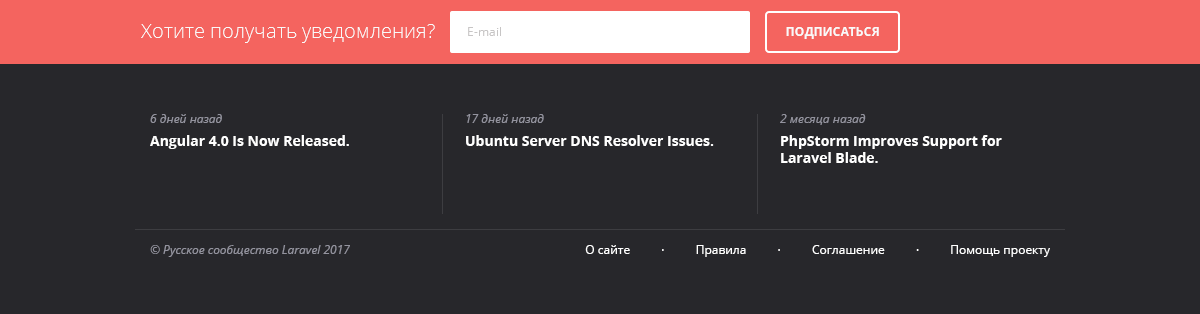
<style>
.page{position:relative;width:1200px;height:314px;background:#27272b}
.page>*{position:absolute;margin:0}
.t1{font:20px "OpenSans-Light";color:#f9f9f9}
.t2{font:12px "OpenSans";color:#c7c5c5}
.t3{font:12px "OpenSans-Bold";color:#f9f9f9}
.t4{font:12px "OpenSans-Italic";color:#93939e}
.t5{font:14px "OpenSans-Bold";color:#ffffff}
.t6{font:12px "OpenSans";color:#ffffff}
</style>
<div class="page">
<p class="t1" style="left:141px;top:24px;width:294px;height:19px">Хотите получать уведомления?</p>
<p class="t2" style="left:468px;top:27px;width:33px;height:9px">E-mail</p>
<p class="t3" style="left:786px;top:27px;width:93px;height:12px">ПОДПИСАТЬСЯ</p>
<p class="t4" style="left:150px;top:114px;width:72px;height:9px">6 дней назад</p>
<p class="t4" style="left:466px;top:114px;width:78px;height:9px">17 дней назад</p>
<p class="t4" style="left:780px;top:114px;width:86px;height:11px">2 месяца назад</p>
<p class="t5" style="left:150px;top:135px;width:199px;height:14px">Angular 4.0 Is Now Released.</p>
<p class="t5" style="left:466px;top:135px;width:248px;height:11px">Ubuntu Server DNS Resolver Issues.</p>
<p class="t5" style="left:781px;top:135px;width:221px;height:28px">PhpStorm Improves Support for Laravel Blade.</p>
<p class="t4" style="left:150px;top:245px;width:200px;height:12px">© Русское сообщество Laravel 2017</p>
<p class="t6" style="left:585px;top:245px;width:465px;height:12px">О сайте          ·          Правила          ·          Соглашение          ·          Помощь проекту</p>
</div>
